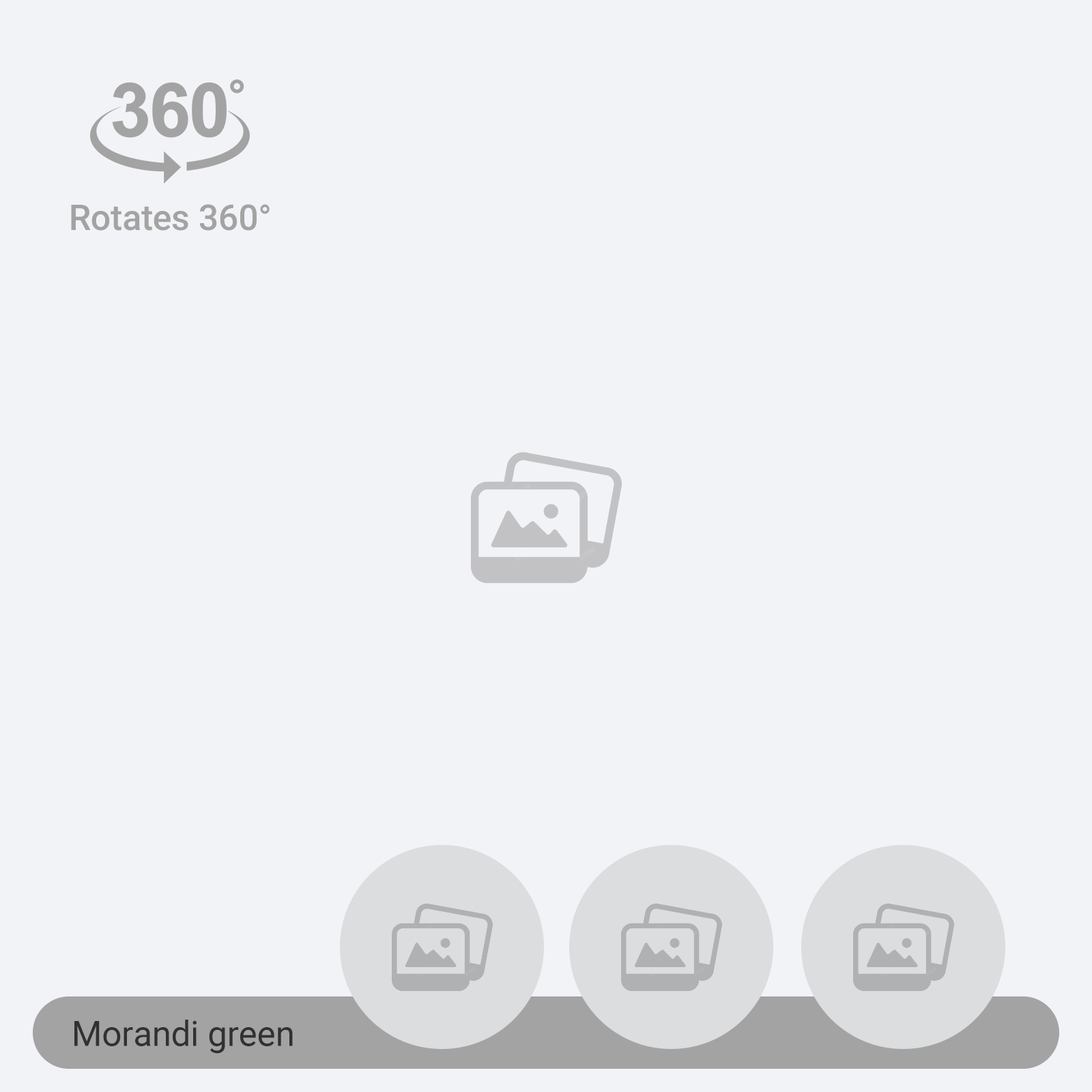
<style>
.page{position:relative;width:1092px;height:1092px;background:#f2f3f6}
.page>*{position:absolute;margin:0}
.t1{font:35.5px "Roboto-Medium";color:#a3a3a3}
.t2{font:34.9px "Roboto-Regular";color:#313131}
</style>
<div class="page">
<p class="t1" style="left:71px;top:204px;width:199px;height:27px">Rotates 360°</p>
<p class="t2" style="left:74px;top:1020px;width:219px;height:34px">Morandi green</p>
</div>
